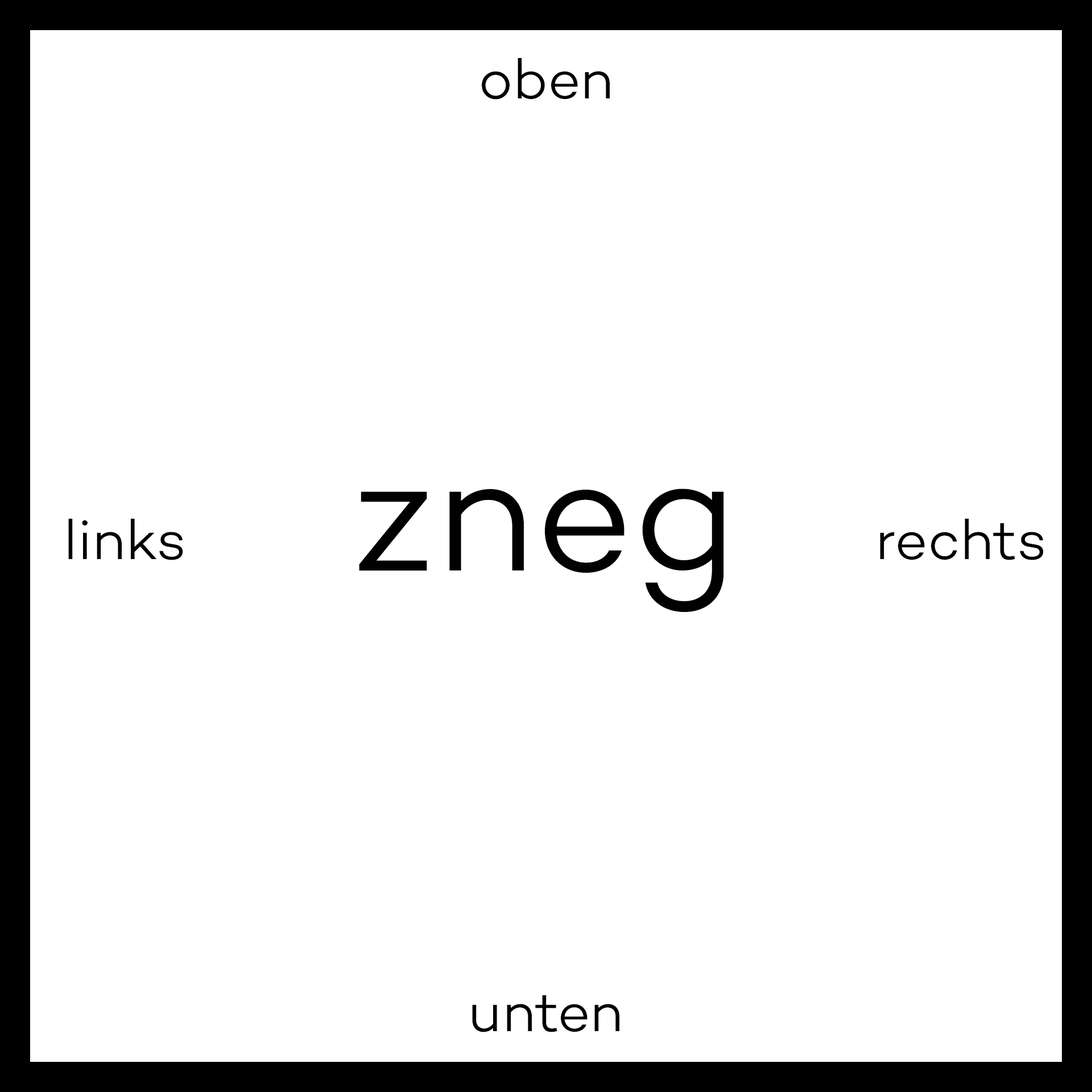
<style>
.page{position:relative;width:1092px;height:1092px;background:#ffffff}
.page>*{position:absolute;margin:0}
.t1{font:56.9px "Campton-LightDEMO";color:#000000}
.t2{font:170.6px "Campton-LightDEMO";color:#010101}
</style>
<div class="page">
<p class="t1" style="left:482px;top:58px;width:128px;height:42px">oben</p>
<p class="t2" style="left:359px;top:489px;width:365px;height:123px">zneg</p>
<p class="t1" style="left:68px;top:519px;width:115px;height:41px">links</p>
<p class="t1" style="left:880px;top:519px;width:164px;height:41px">rechts</p>
<p class="t1" style="left:472px;top:995px;width:147px;height:37px">unten</p>
</div>
